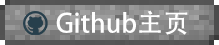
<style>
.page{position:relative;width:219px;height:45px}
.page>*{position:absolute;margin:0}
.t1{font:26px "AdobeHeitiStd-Regular";color:#ffffff}
.t2{font:26px "AdobeHeitiStd-Regular";color:#ffffff;text-transform:uppercase}
</style>
<div class="page">
<p class="t1" style="left:56px;top:10px;width:132px;height:25px">Github<span class="t2">主页</span></p>
</div>
